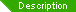
<style>
.page{position:relative;width:76px;height:12px;background:#34a900}
.page>*{position:absolute;margin:0}
.t1{font:10px "ArialMT";color:#ffffff}
</style>
<div class="page">
<p class="t1" style="left:19px;top:2px;width:48px;height:9px">Description</p>
</div>
